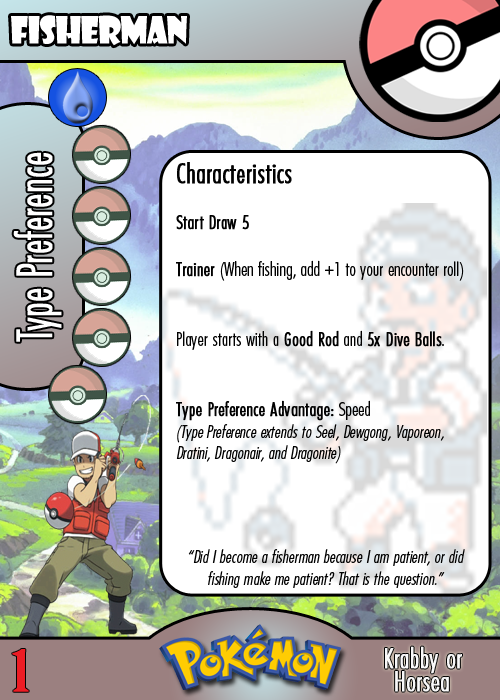
<style>
.page{position:relative;width:500px;height:700px;background:#ffffff}
.page>*{position:absolute;margin:0}
.t1{font:36.7px "ShowcardGothic-Reg";letter-spacing:-0.025em;color:#ffffff;scale:0.91 1}
.t2{font:46.7px "Futura-CondensedLight";color:#ffffff;font-weight:bold;scale:0.83 1}
.t3{font:18.1px "FuturaCondensedBQ-Light";color:#010101;font-style:italic}
.t4{font:27.8px "FuturaCondensedBQ-Light";color:#010101;font-weight:bold}
.t5{font:19.4px "FuturaCondensedBQ-Light";color:#010101;font-weight:bold}
.t6{font:19.4px "FuturaCondensedBQ-Light";color:#010101}
.t7{font:55.6px "BirchStd";color:#ed1c24;font-weight:bold;scale:1.5 1}
.t8{font:27.8px "FuturaCondensedBQ-Light";color:#f9f9f9;font-weight:bold}
</style>
<div class="page">
<p class="t1" style="left:11px;top:15px;width:176px;height:31px">Fisherman</p>
<p class="t2" style="left:13px;top:152px;width:49px;height:190px;rotate:-90deg">Type Preference</p>
<p class="t3" style="left:176px;top:162px;width:288px;height:302px"><span class="t4">Characteristics<br></span><span class="t5"><br>Start Draw 5<br><br>Trainer </span><span class="t6">(When fishing, add +1 to your encounter roll)<br><br><br>Player starts with a </span><span class="t5">Good Rod</span><span class="t6"> and </span><span class="t5">5x Dive Balls</span><span class="t6">.<br><br><br></span><span class="t5">Type Preference Advantage:</span><span class="t6"> Speed<br></span>(Type Preference extends to Seel, Dewgong, Vaporeon, Dratini, Dragonair, and Dragonite)</p>
<p class="t3" style="left:188px;top:549px;width:277px;height:39px;text-align:center">“Did I become a fisherman because I am patient, or did fishing make me patient? That is the question.”</p>
<p class="t7" style="left:12px;top:649px;width:17px;height:43px">1</p>
<p class="t8" style="left:385px;top:646px;width:77px;height:28px">Krabby or</p>
<p class="t8" style="left:395px;top:671px;width:54px;height:21px">Horsea</p>
</div>
